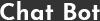
<style>
.page{position:relative;width:100px;height:21px;background:#333333}
.page>*{position:absolute;margin:0}
.t1{font:24px "JosefinSans-Bold";color:#ffffff}
</style>
<div class="page">
<p class="t1" style="left:0px;top:1px;width:100px;height:19px">Chat Bot</p>
</div>
